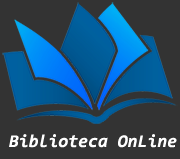
<style>
.page{position:relative;width:180px;height:159px;background:#333333}
.page>*{position:absolute;margin:0}
.t1{font:18px "Consolas-BoldItalic";color:#ffffff}
</style>
<div class="page">
<p class="t1" style="left:9px;top:134px;width:168px;height:14px">Biblioteca OnLine</p>
</div>
